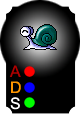
<style>
.page{position:relative;width:80px;height:120px;background:#000000}
.page>*{position:absolute;margin:0}
.t1{font:16px "ArialMT";color:#ae0000}
.t2{font:16px "ArialMT";color:#ff9601}
.t3{font:16px "ArialMT";color:#ffffff}
</style>
<div class="page">
<p class="t1" style="left:9px;top:65px;width:12px;height:12px">A</p>
<p class="t2" style="left:11px;top:81px;width:10px;height:12px">D</p>
<p class="t3" style="left:10px;top:97px;width:10px;height:13px">S</p>
</div>
